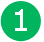
<style>
.page{position:relative;width:44px;height:42px;background:#00b55d}
.page>*{position:absolute;margin:0}
.t1{font:30px "Verdana";color:#ffffff}
</style>
<div class="page">
<p class="t1" style="left:15px;top:9px;width:12px;height:22px">1</p>
</div>
